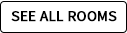
<style>
.page{position:relative;width:127px;height:33px;background:#ffffff}
.page>*{position:absolute;margin:0}
.t1{font:15px "SourceSansPro-Regular";color:#000000;text-transform:uppercase;font-weight:bold}
</style>
<div class="page">
<p class="t1" style="left:11px;top:11px;width:106px;height:11px">See all rooms</p>
</div>
